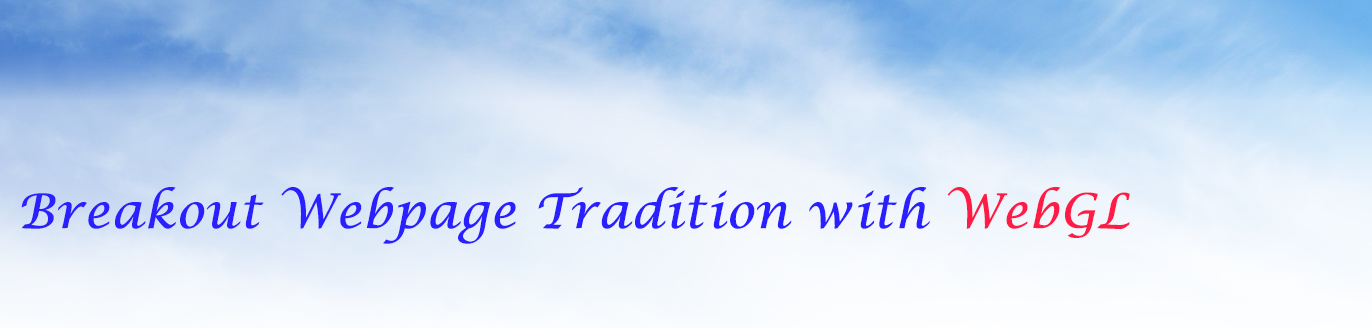
<style>
.page{position:relative;width:1372px;height:328px}
.page>*{position:absolute;margin:0}
.t1{font:47.7px "LucidaCalligraphy-Italic";color:#2a1fff;font-weight:bold}
.t2{font:47.7px "LucidaCalligraphy-Italic";color:#fe1b46;font-weight:bold}
</style>
<div class="page">
<p class="t1" style="left:21px;top:187px;width:1109px;height:57px">Breakout Webpage Tradition with <span class="t2">WebGL</span></p>
</div>
